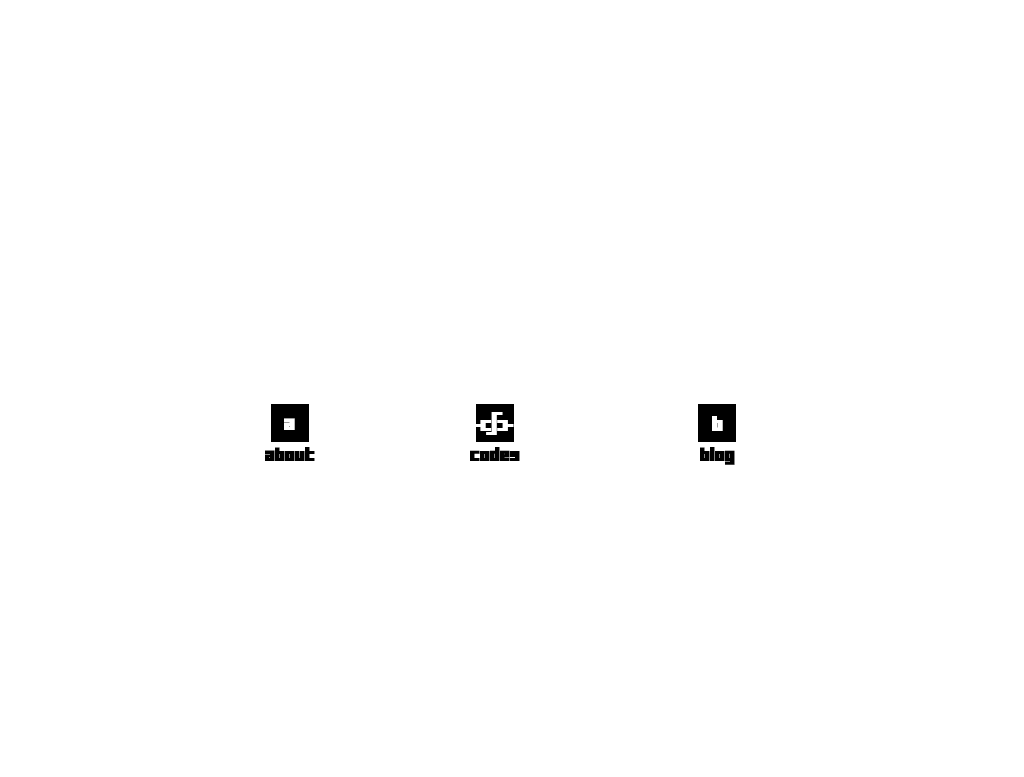
<style>
.page{position:relative;width:1024px;height:777px;background:#ffffff}
.page>*{position:absolute;margin:0}
.t1{font:20px "Tutor";color:#ffffff}
.t2{font:18px "Tutor";color:#000000}
.t3{font:18px "Tutor";color:#010101}
</style>
<div class="page">
<p class="t1" style="left:475px;top:412px;width:39px;height:23px">&lt;/&gt;</p>
<p class="t1" style="left:284px;top:418px;width:11px;height:12px">a</p>
<p class="t1" style="left:712px;top:416px;width:11px;height:15px">b</p>
<p class="t2" style="left:265px;top:447px;width:50px;height:14px">about</p>
<p class="t3" style="left:470px;top:447px;width:50px;height:14px">codes</p>
<p class="t2" style="left:700px;top:447px;width:35px;height:18px">blog</p>
</div>
